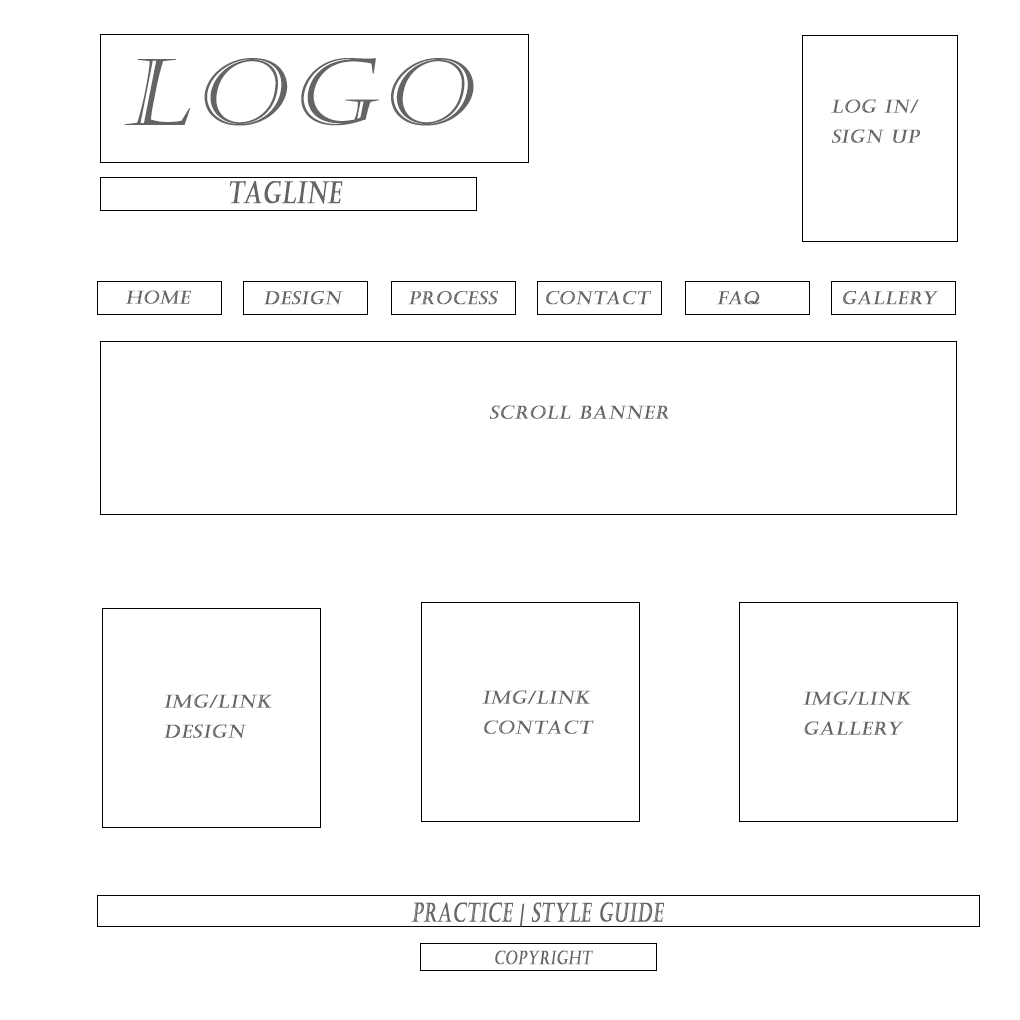
<style>
.page{position:relative;width:1020px;height:1020px;background:#ffffff}
.page>*{position:absolute;margin:0}
.t1{font:91.9px "Castellar";letter-spacing:0.04em;color:#646464;font-weight:bold;font-style:italic;scale:1.12 1}
.t2{font:18px/30px "Castellar";letter-spacing:0.04em;color:#646464;font-weight:bold;font-style:italic}
.t3{font:29.9px "Castellar";letter-spacing:0.04em;color:#646464;font-weight:bold;font-style:italic;scale:0.73 1}
.t4{font:18px "Castellar";letter-spacing:0.04em;color:#646464;font-weight:bold;font-style:italic}
.t5{font:26px "Castellar";letter-spacing:0.04em;color:#646464;font-weight:bold;font-style:italic;scale:0.65 1}
.t6{font:18.6px "Castellar";letter-spacing:0.04em;color:#646464;font-weight:bold;font-style:italic;scale:0.73 1}
</style>
<div class="page">
<p class="t1" style="left:124px;top:58px;width:350px;height:68px">Logo</p>
<p class="t2" style="left:831px;top:99px;width:90px;height:44px;text-align:justify">Log In/<br>Sign up</p>
<p class="t3" style="left:229px;top:181px;width:114px;height:23px">TagLine</p>
<p class="t4" style="left:125px;top:290px;width:66px;height:14px">Home</p>
<p class="t4" style="left:263px;top:291px;width:80px;height:14px">Design</p>
<p class="t4" style="left:408px;top:291px;width:90px;height:14px">Process</p>
<p class="t4" style="left:546px;top:291px;width:105px;height:14px">Contact</p>
<p class="t4" style="left:716px;top:291px;width:44px;height:14px">FAQ</p>
<p class="t4" style="left:843px;top:291px;width:96px;height:14px">Gallery</p>
<p class="t4" style="left:490px;top:405px;width:179px;height:14px">Scroll banner</p>
<p class="t2" style="left:163px;top:694px;width:110px;height:44px;text-align:justify">IMg/link<br>design</p>
<p class="t2" style="left:482px;top:690px;width:112px;height:44px;text-align:justify">Img/Link<br>Contact</p>
<p class="t2" style="left:803px;top:691px;width:109px;height:44px;text-align:justify">Img/link<br>Gallery</p>
<p class="t5" style="left:411px;top:902px;width:253px;height:25px">practice | Style Guide</p>
<p class="t6" style="left:495px;top:950px;width:98px;height:15px">Copyright</p>
</div>
